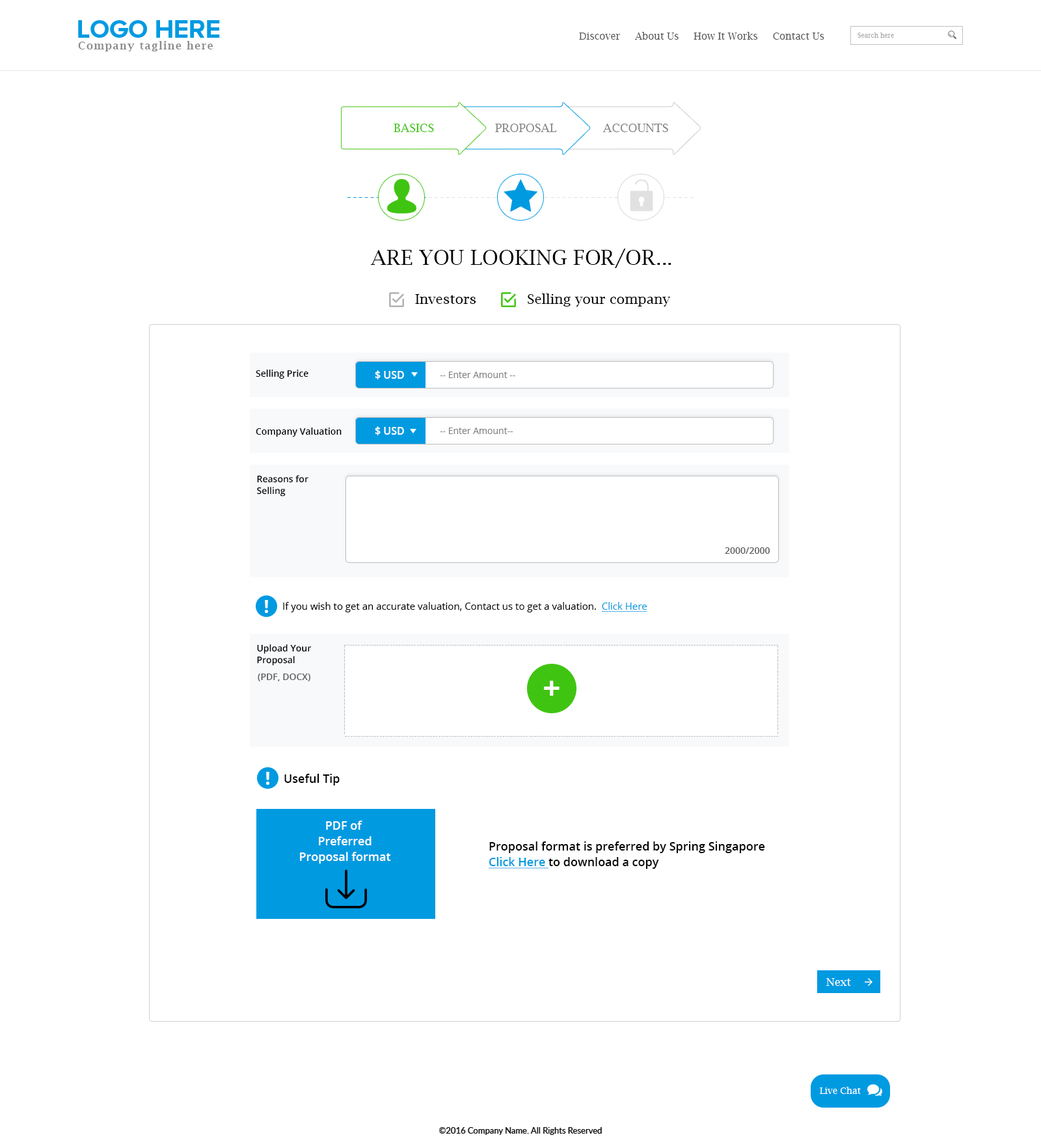
<style>
.page{position:relative;width:1041px;height:1146px;background:#ffffff}
.page>*{position:absolute;margin:0}
.t1{font:26px "ProximaNovaA-Bold";color:#009ae1;text-transform:uppercase}
.t2{font:10.4px "LucidaBright-Demi";letter-spacing:0.1em;color:#898989}
.t3{font:9.8px "LucidaBright";color:#585858}
.t4{font:6.5px "LucidaBright";color:#afafaf}
.t5{font:11.7px "LucidaBright";color:#40c412}
.t6{font:11.7px "LucidaBright";color:#818181}
.t7{font:11.7px "LucidaBright";color:#818181;text-transform:uppercase}
.t8{font:13.7px "LucidaBright";letter-spacing:0.1em;color:#e1e1e1}
.t9{font:13.7px "LucidaBright";letter-spacing:0.1em;color:#009ae1}
.t10{font:20.8px "LucidaBright";color:#000000;text-transform:uppercase}
.t11{font:13.7px "LucidaBright";color:#000000}
.t12{font:9.1px "OpenSans-Semibold";color:#000000}
.t13{font:10.4px "OpenSans-Semibold";color:#ffffff}
.t14{font:9.1px "OpenSans";color:#808080}
.t15{font:9.1px/11.7px "OpenSans-Semibold";color:#000000}
.t16{font:9.1px "OpenSans-Semibold";color:#5a5a5a}
.t17{font:18.4px "OpenSans-Bold";color:#ffffff}
.t18{font:9.8px "OpenSans";color:#000000}
.t19{font:9.8px "OpenSans";color:#009ae1;text-decoration:underline}
.t20{font:7.3px "ArialMT";color:#c2c2c2;scale:1.35 1}
.t21{font:9.9px "ArialMT";color:#c2c2c2;scale:0.74 1}
.t22{font:7.2px "ArialMT";color:#c2c2c2;scale:1.38 1}
.t23{font:31.2px "OpenSans-Bold";color:#ffffff}
.t24{font:7.2px "ArialMT";color:#c2c2c2}
.t25{font:11.7px "OpenSans-Semibold";color:#000000}
.t26{font:11.7px/15.6px "OpenSans-Semibold";color:#ffffff}
.t27{font:11.7px/15.6px "OpenSans-Semibold";color:#000000}
.t28{font:11.7px/15.6px "OpenSans-Semibold";color:#009ae1;text-decoration:underline}
.t29{font:11.1px "LucidaBright";color:#ffffff}
.t30{font:9.1px "LucidaBright";color:#ffffff}
.t31{font:8.5px "Lato-Regular";color:#000000}
</style>
<div class="page">
<p class="t1" style="left:78px;top:20px;width:142px;height:18px">Logo HERE</p>
<p class="t2" style="left:78px;top:41px;width:135px;height:10px">Company tagline here</p>
<p class="t3" style="left:579px;top:32px;width:245px;height:8px">Discover     About Us     How It Works     Contact Us</p>
<p class="t4" style="left:857px;top:33px;width:37px;height:5px">Search here</p>
<p class="t5" style="left:394px;top:124px;width:40px;height:8px">BASICS</p>
<p class="t6" style="left:495px;top:124px;width:61px;height:8px">PROPOSAL</p>
<p class="t7" style="left:602px;top:124px;width:66px;height:8px">Accounts</p>
<p class="t8" style="left:347px;top:197px;width:346px;height:1px"><span class="t9">--------------</span>----------------------------------------------</p>
<p class="t10" style="left:371px;top:249px;width:300px;height:19px">Are you looking for/OR...</p>
<p class="t11" style="left:528px;top:293px;width:142px;height:13px">Selling your company</p>
<p class="t11" style="left:415px;top:294px;width:61px;height:10px">Investors</p>
<p class="t12" style="left:256px;top:370px;width:52px;height:9px">Selling Price</p>
<p class="t13" style="left:375px;top:370px;width:29px;height:9px">$ USD</p>
<p class="t14" style="left:440px;top:371px;width:75px;height:7px">-- Enter Amount --</p>
<p class="t12" style="left:256px;top:427px;width:86px;height:10px">Company Valuation</p>
<p class="t13" style="left:375px;top:426px;width:29px;height:9px">$ USD</p>
<p class="t14" style="left:440px;top:427px;width:73px;height:7px">-- Enter Amount--</p>
<p class="t15" style="left:257px;top:475px;width:51px;height:21px">Reasons for <br>Selling</p>
<p class="t16" style="left:725px;top:547px;width:45px;height:7px">2000/2000</p>
<p class="t17" style="left:265px;top:600px;width:3px;height:13px">!</p>
<p class="t18" style="left:283px;top:602px;width:364px;height:10px">If you wish to get an accurate valuation, Contact us to get a valuation.  <span class="t19">Click Here</span></p>
<p class="t15" style="left:257px;top:644px;width:54px;height:22px">Upload Your <br>Proposal</p>
<p class="t20" style="left:344px;top:645px;width:1px;height:89px;rotate:90deg">-------------------------</p>
<p class="t21" style="left:345px;top:645px;width:433px;height:0px">-------------------------------------------------------------------------------------------------------------------------------------------------------------------</p>
<p class="t22" style="left:777px;top:645px;width:1px;height:89px;rotate:90deg">-------------------------</p>
<p class="t16" style="left:258px;top:673px;width:52px;height:8px">(PDF, DOCX)</p>
<p class="t23" style="left:544px;top:680px;width:15px;height:15px">+</p>
<p class="t24" style="left:345px;top:736px;width:433px;height:0px">-------------------------------------------------------------------------------------------------------------------------------------------------------------------</p>
<p class="t17" style="left:266px;top:772px;width:3px;height:13px">!</p>
<p class="t25" style="left:284px;top:773px;width:56px;height:12px">Useful Tip</p>
<p class="t26" style="left:300px;top:820px;width:91px;height:43px;text-align:center">PDF of <br>Preferred<br>Proposal format</p>
<p class="t27" style="left:489px;top:841px;width:276px;height:27px">Proposal format is preferred by Spring Singapore<br><span class="t28">Click Here </span>to download a copy</p>
<p class="t29" style="left:826px;top:978px;width:25px;height:8px">Next</p>
<p class="t30" style="left:820px;top:1086px;width:41px;height:8px">Live Chat</p>
<p class="t31" style="left:439px;top:1127px;width:163px;height:8px">©2016 Company Name. All Rights Reserved</p>
</div>
